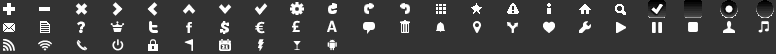
<style>
.page{position:relative;width:776px;height:54px;background:#333333}
.page>*{position:absolute;margin:0}
.t1{font:16.2px "ChunkFive-Roman";color:#ffffff;text-transform:uppercase}
.t2{font:15.3px "ChunkFive-Roman";color:#ffffff;text-transform:uppercase}
.t3{font:15.6px "Aller-Bold";color:#ffffff;text-transform:uppercase;scale:1.04 1}
</style>
<div class="page">
<p class="t1" style="left:77px;top:21px;width:8px;height:12px">?</p>
<p class="t2" style="left:220px;top:21px;width:9px;height:13px">$</p>
<p class="t3" style="left:255px;top:21px;width:10px;height:13px">€</p>
<p class="t3" style="left:292px;top:20px;width:8px;height:12px">£</p>
<p class="t3" style="left:327px;top:20px;width:10px;height:12px">A</p>
</div>
